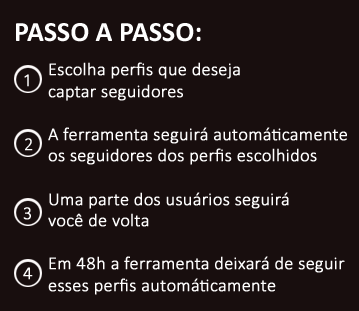
<style>
.page{position:relative;width:359px;height:311px;background:#180e0e}
.page>*{position:absolute;margin:0}
.t1{font:28px "Calibri-Bold";color:#ffffff}
.t2{font:18px "Calibri-Light";color:#ffffff;font-weight:bold}
</style>
<div class="page">
<p class="t1" style="left:16px;top:23px;width:185px;height:19px">PASSO A PASSO:</p>
<p class="t2" style="left:48px;top:62px;width:299px;height:233px">Escolha perfis que deseja <br>     captar seguidores<br>        <br>     A ferramenta seguirá automáticamente <br>     os seguidores dos perfis escolhidos<br>        <br>     Uma parte dos usuários seguirá<br>     você de volta<br>                <br>     Em 48h a ferramenta deixará de seguir<br>     esses perfis automáticamente</p>
<p class="t2" style="left:24px;top:74px;width:5px;height:13px">1</p>
<p class="t2" style="left:25px;top:138px;width:8px;height:13px">2</p>
<p class="t2" style="left:23px;top:207px;width:8px;height:13px">3</p>
<p class="t2" style="left:23px;top:267px;width:10px;height:13px">4</p>
</div>
